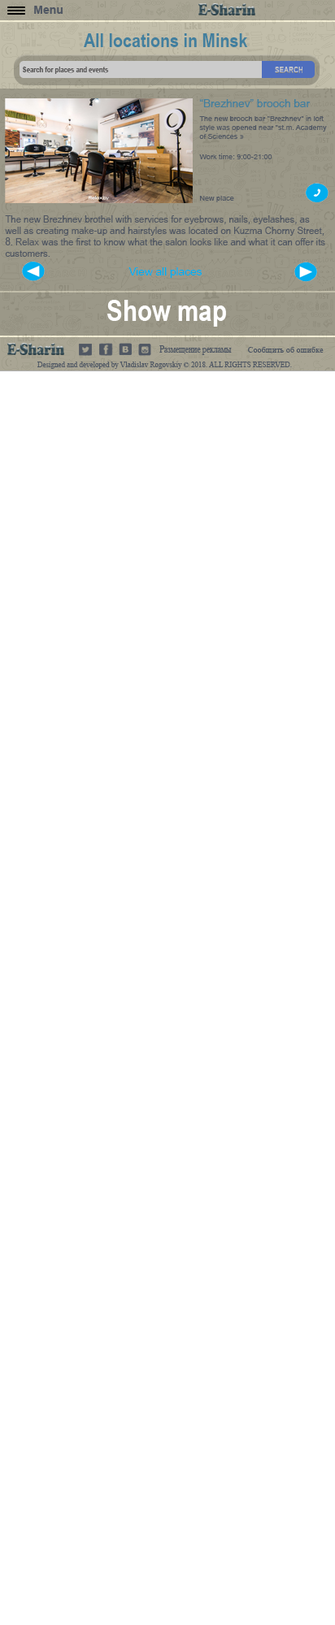
<style>
.page{position:relative;width:335px;height:1625px;background:#ffffff}
.page>*{position:absolute;margin:0}
.t1{font:19.5px "ArialNarrow-Bold";color:#427f9e}
.t2{font:7.6px "Arial-BoldMT";color:#5a5959;scale:0.82 1}
.t3{font:11.4px "ArialNarrow";color:#427f9e;scale:1.19 1}
.t4{font:7.6px "ArialNarrow";color:#505763;scale:1.19 1}
.t5{font:9.5px "ArialNarrow";color:#505763;scale:1.19 1}
.t6{font:11.4px "ArialNarrow";color:#00aeef;scale:1.19 1}
.t7{font:29.2px "ArialNarrow-Bold";color:#ffffff}
.t8{font:10.4px "TimesNewRomanPSMT";color:#4c5563;scale:0.76 1}
.t9{font:8.5px "TimesNewRomanPSMT";color:#4c5563}
.t10{font:7.3px "TimesNewRomanPSMT";color:#4c5563}
</style>
<div class="page">
<p class="t1" style="left:84px;top:33px;width:164px;height:14px">All locations in Minsk</p>
<p class="t2" style="left:23px;top:67px;width:86px;height:7px">Search for places and events</p>
<p class="t3" style="left:199px;top:99px;width:111px;height:8px">“Brezhnev” brooch bar</p>
<p class="t4" style="left:199px;top:115px;width:128px;height:24px">The new brooch bar "Brezhnev" in loft style was opened near "st.m. Academy of Sciences »</p>
<p class="t4" style="left:199px;top:154px;width:73px;height:5px">Work time: 9:00-21:00</p>
<p class="t4" style="left:200px;top:196px;width:34px;height:6px">New place</p>
<p class="t5" style="left:5px;top:215px;width:320px;height:42px">The new Brezhnev brothel with services for eyebrows, nails, eyelashes, as well as creating make-up and hairstyles was located on Kuzma Chorny Street, 8. Relax was the first to know what the salon looks like and what it can offer its customers.</p>
<p class="t6" style="left:128px;top:267px;width:73px;height:11px">View all places</p>
<p class="t7" style="left:107px;top:300px;width:119px;height:27px">Show map</p>
<p class="t8" style="left:159px;top:345px;width:73px;height:10px">Размещение рекламы</p>
<p class="t9" style="left:248px;top:347px;width:75px;height:6px">Сообщить об ошибке</p>
<p class="t10" style="left:37px;top:362px;width:255px;height:7px">Designed and developed by Vladislav Rogovskiy © 2018. ALL RIGHTS RESERVED.</p>
</div>
